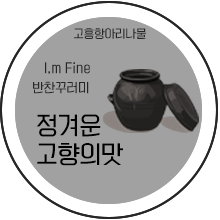
<style>
.page{position:relative;width:220px;height:220px;background:#a1a1a1}
.page>*{position:absolute;margin:0}
.t1{font:11px "KoreanYNSJG3-R";color:#262626}
.t2{font:12px/19.8px "KoreanYNSJG3-R";color:#262626}
.t3{font:23px/28.6px "KoreanYNSJG3-R";color:#000000}
</style>
<div class="page">
<p class="t1" style="left:74px;top:28px;width:72px;height:11px">고흥항아리나물</p>
<p class="t1" style="left:74px;top:28px;width:72px;height:11px">고흥항아리나물</p>
<p class="t2" style="left:33px;top:62px;width:57px;height:32px">I,m Fine<br>반찬꾸러미</p>
<p class="t2" style="left:33px;top:62px;width:57px;height:32px">I,m Fine<br>반찬꾸러미</p>
<p class="t3" style="left:36px;top:114px;width:87px;height:52px">정겨운<br>고향의맛</p>
<p class="t3" style="left:36px;top:114px;width:87px;height:52px">정겨운<br>고향의맛</p>
</div>
